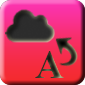
<style>
.page{position:relative;width:85px;height:85px}
.page>*{position:absolute;margin:0}
.t1{font:40px "TimesNewRomanPS-BoldMT"}
</style>
<div class="page">
<p class="t1" style="left:35px;top:51px;width:29px;height:27px">A</p>
</div>
